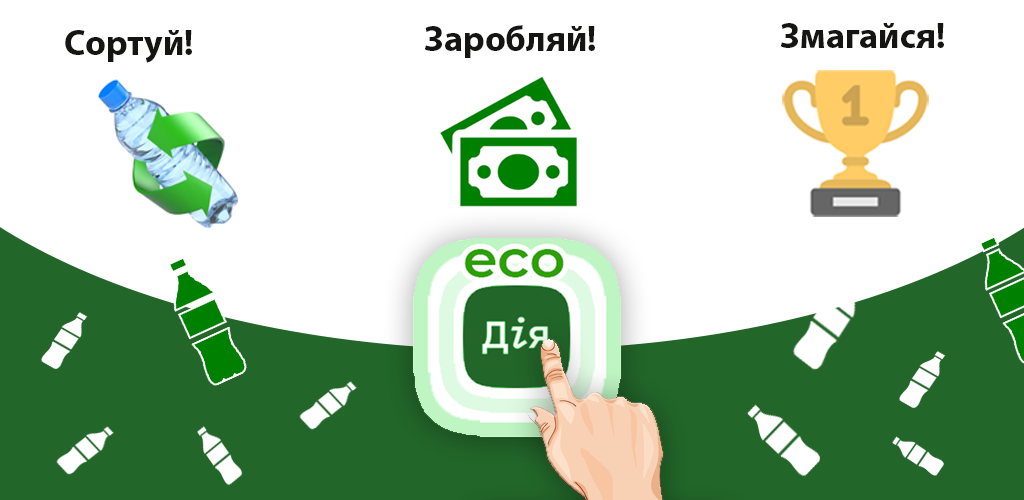
<style>
.page{position:relative;width:1024px;height:500px;background:#ffffff}
.page>*{position:absolute;margin:0}
.t1{font:36px "MyriadPro-Bold";color:#151514}
</style>
<div class="page">
<p class="t1" style="left:65px;top:30px;width:127px;height:33px">Сортуй!</p>
<p class="t1" style="left:424px;top:25px;width:171px;height:33px">Заробляй!</p>
<p class="t1" style="left:780px;top:23px;width:164px;height:25px">Змагайся!</p>
</div>
